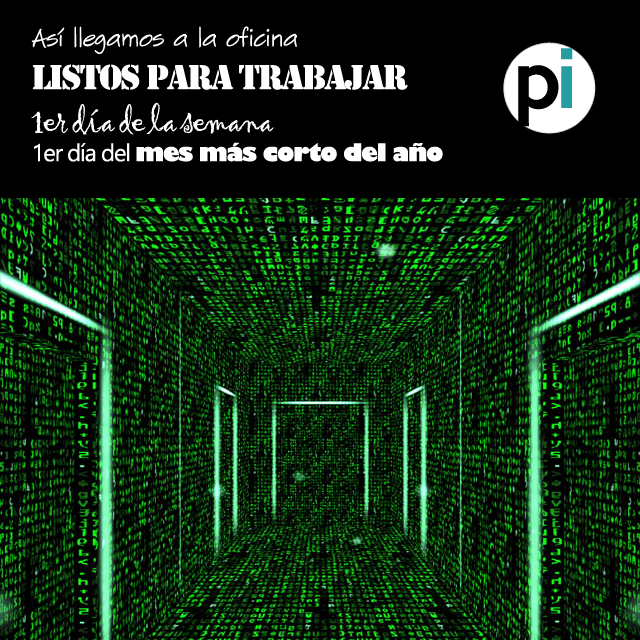
<style>
.page{position:relative;width:640px;height:640px;background:#000000}
.page>*{position:absolute;margin:0}
.t1{font:24px "SketchFlowPrint";letter-spacing:-0.05em;color:#ffffff}
.t2{font:36px "Stencil";letter-spacing:-0.05em;color:#ffffff}
.t3{font:36px "Gigi-Regular";letter-spacing:-0.05em;color:#ffffff}
.t4{font:24px "Gadugi";letter-spacing:-0.05em;color:#ffffff}
.t5{font:24px "GillSans-UltraBold";letter-spacing:-0.05em;color:#ffffff}
.t6{font:72px "KeepCalm-Medium";letter-spacing:-0.05em;color:#000000}
.t7{font:72px "KeepCalm-Medium";letter-spacing:-0.05em;color:#259da1}
</style>
<div class="page">
<p class="t1" style="left:31px;top:26px;width:412px;height:136px">Así llegamos a la oficina<br><span class="t2">Listos para trabajar<br></span><span class="t3">1er día de la semana<br></span><span class="t4">1er día del </span><span class="t5">mes más corto del año</span></p>
<p class="t6" style="left:518px;top:48px;width:55px;height:79px">p<span class="t7">i</span></p>
</div>
